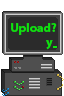
<style>
.page{position:relative;width:64px;height:96px;background:#4f4f4f}
.page>*{position:absolute;margin:0}
.t1{font:12.5px "MyriadPro-Bold";color:#0de50d}
</style>
<div class="page">
<p class="t1" style="left:11px;top:23px;width:46px;height:12px">Upload?</p>
<p class="t1" style="left:46px;top:40px;width:7px;height:10px">y</p>
</div>
